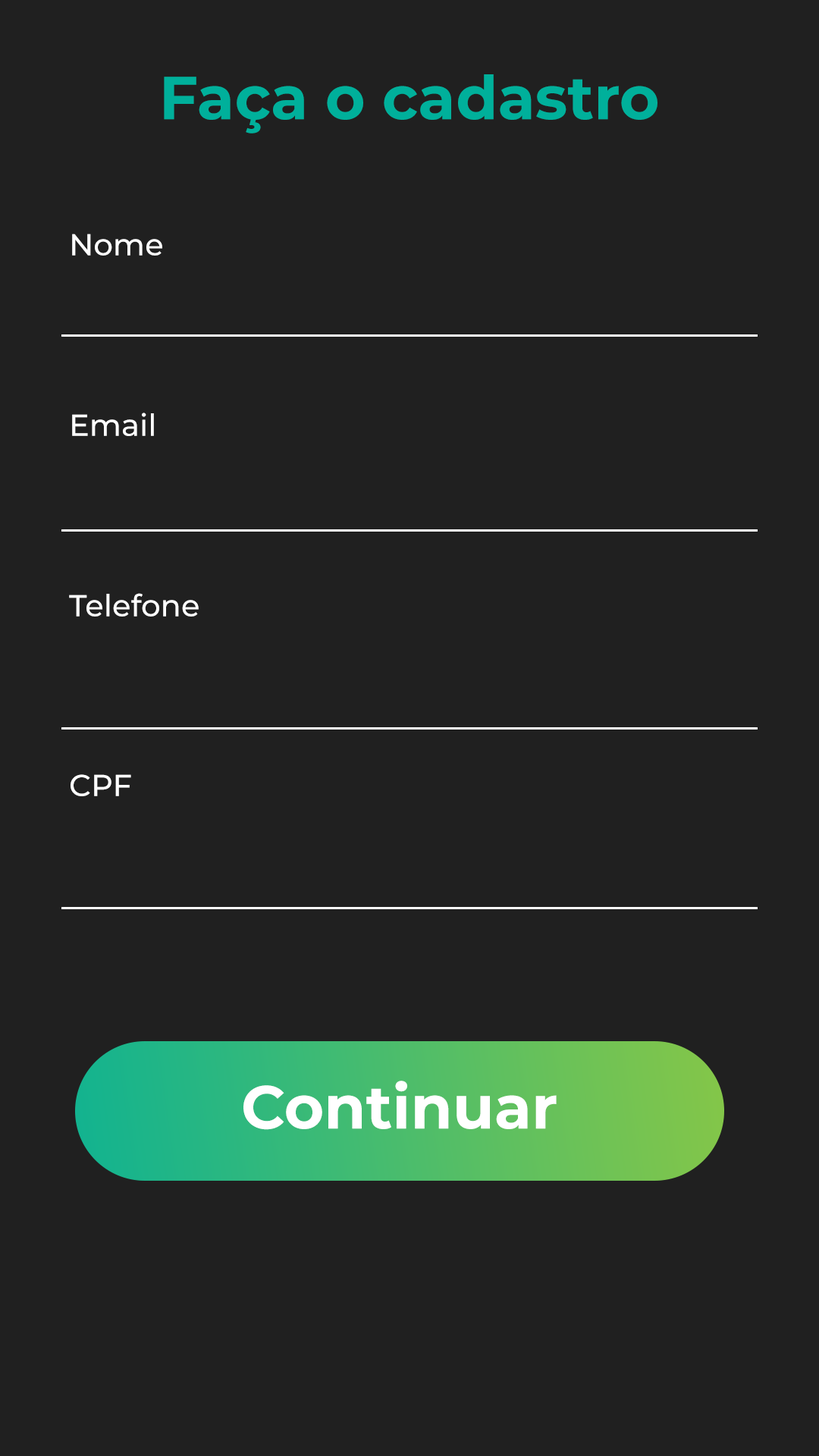
<style>
.page{position:relative;width:819px;height:1456px;background:#202020}
.page>*{position:absolute;margin:0}
.t1{font:60.7px "Montserrat-Bold";color:#00b09b}
.t2{font:30.3px "Montserrat-Medium";color:#ffffff}
.t3{font:60.7px "Montserrat-Bold";color:#ffffff}
</style>
<div class="page">
<p class="t1" style="left:164px;top:74px;width:493px;height:59px">Faça o cadastro</p>
<p class="t2" style="left:72px;top:234px;width:90px;height:22px">Nome</p>
<p class="t2" style="left:72px;top:413px;width:82px;height:23px">Email</p>
<p class="t2" style="left:69px;top:593px;width:130px;height:24px">Telefone</p>
<p class="t2" style="left:71px;top:774px;width:60px;height:22px">CPF</p>
<p class="t3" style="left:243px;top:1081px;width:314px;height:49px">Continuar</p>
</div>
